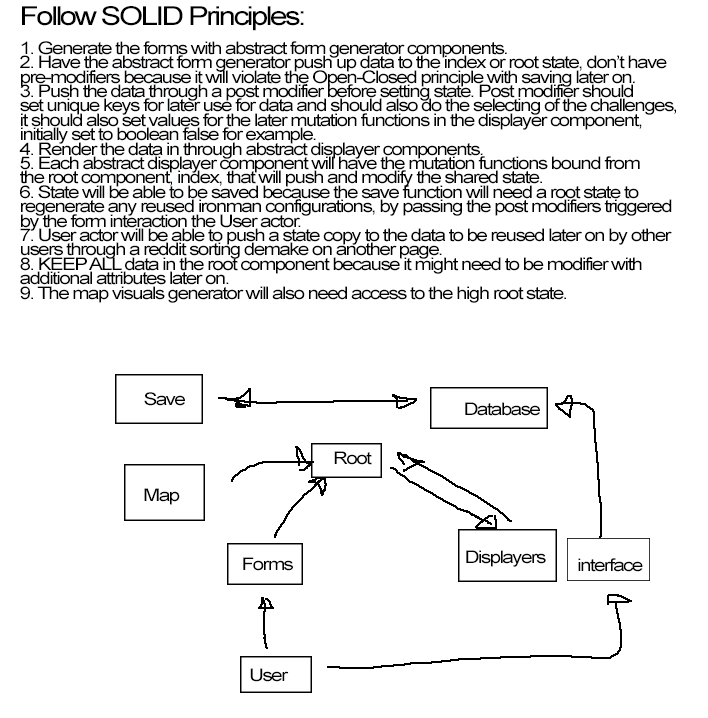
<style>
.page{position:relative;width:708px;height:718px;background:#ffffff}
.page>*{position:absolute;margin:0}
.t1{font:17.4px "ArialMT";letter-spacing:-0.08em;color:#000000;scale:1.19 1}
.t2{font:26.1px "ArialMT";letter-spacing:-0.08em;color:#000000;scale:1.19 1}
</style>
<div class="page">
<p class="t1" style="left:19px;top:6px;width:657px;height:297px"><span class="t2">Follow SOLID Principles:<br></span><br>1. Generate the forms with abstract form generator components.<br>2. Have the abstract form generator push up data to the index or root state, don’t have<br>pre-modifiers because it will violate the Open-Closed principle with saving later on.<br>3. Push the data through a post modifier before setting state. Post modifier should<br>set unique keys for later use for data and should also do the selecting of the challenges,<br>it should also set values for the later mutation functions in the displayer component,<br>initially set to boolean false for example.<br>4. Render the data in through abstract displayer components.<br>5. Each abstract displayer component will have the mutation functions bound from<br>the root component, index, that will push and modify the shared state.<br>6. State will be able to be saved because the save function will need a root state to<br>regenerate any reused ironman configurations, by passing the post modifiers triggered<br>by the form interaction the User actor. <br>7. User actor will be able to push a state copy to the data to be reused later on by other<br>users through a reddit sorting demake on another page.<br>8. KEEP ALL data in the root component because it might need to be modifier with<br>additional attributes later on.<br>9. The map visuals generator will also need access to the high root state.</p>
<p class="t1" style="left:144px;top:392px;width:41px;height:14px">Save</p>
<p class="t1" style="left:465px;top:402px;width:75px;height:14px">Database</p>
<p class="t1" style="left:334px;top:451px;width:38px;height:14px">Root</p>
<p class="t1" style="left:144px;top:488px;width:36px;height:17px">Map</p>
<p class="t1" style="left:243px;top:557px;width:50px;height:14px">Forms</p>
<p class="t1" style="left:466px;top:550px;width:80px;height:17px">Displayers</p>
<p class="t1" style="left:578px;top:558px;width:65px;height:14px">interface</p>
<p class="t1" style="left:250px;top:668px;width:39px;height:14px">User</p>
</div>
